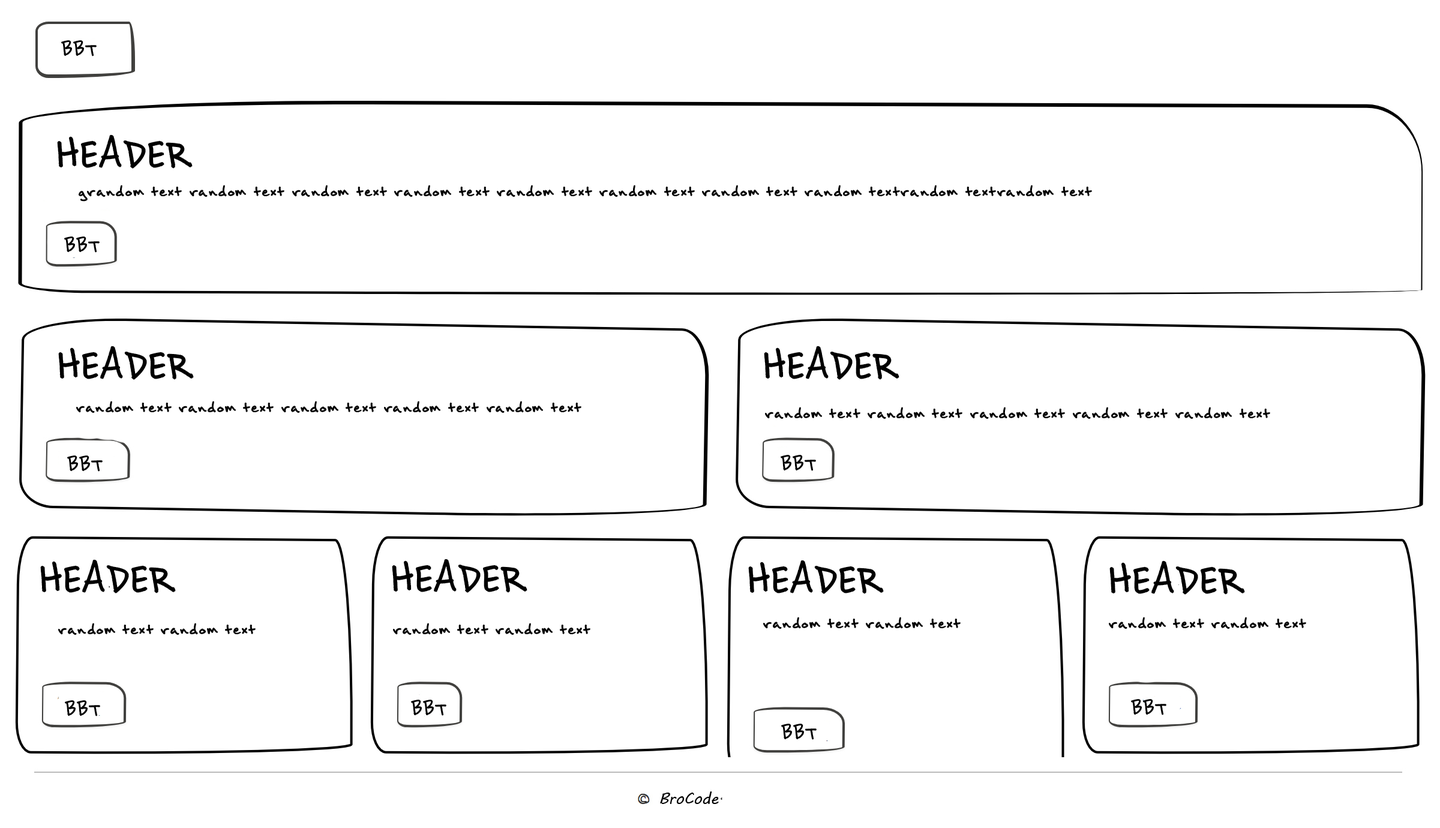
<style>
.page{position:relative;width:1440px;height:828px;background:#ffffff}
.page>*{position:absolute;margin:0}
.t1{font:25.3px "BrownBagLunch";color:#000000}
.t2{font:53.2px "BrownBagLunch";color:#000000}
</style>
<div class="page">
<p class="t1" style="left:61px;top:40px;width:36px;height:16px">BBT</p>
<p class="t2" style="left:57px;top:134px;width:136px;height:35px">HEADER</p>
<p class="t1" style="left:79px;top:185px;width:1013px;height:17px">grandom text random text random text random text random text random text random text random textrandom textrandom text</p>
<p class="t1" style="left:64px;top:236px;width:36px;height:17px">BBT</p>
<p class="t2" style="left:58px;top:346px;width:136px;height:34px">HEADER</p>
<p class="t2" style="left:764px;top:346px;width:135px;height:34px">HEADER</p>
<p class="t1" style="left:76px;top:401px;width:505px;height:12px">random text random text random text random text random text</p>
<p class="t1" style="left:765px;top:407px;width:505px;height:12px">random text random text random text random text random text</p>
<p class="t1" style="left:67px;top:455px;width:36px;height:17px">BBT</p>
<p class="t1" style="left:781px;top:455px;width:35px;height:16px">BBT</p>
<p class="t2" style="left:40px;top:559px;width:136px;height:34px">HEADER</p>
<p class="t2" style="left:392px;top:559px;width:135px;height:34px">HEADER</p>
<p class="t2" style="left:748px;top:560px;width:136px;height:34px">HEADER</p>
<p class="t2" style="left:1109px;top:560px;width:136px;height:35px">HEADER</p>
<p class="t1" style="left:763px;top:617px;width:198px;height:12px">random text random text</p>
<p class="t1" style="left:1109px;top:617px;width:197px;height:12px">random text random text</p>
<p class="t1" style="left:58px;top:623px;width:198px;height:12px">random text random text</p>
<p class="t1" style="left:393px;top:623px;width:197px;height:12px">random text random text</p>
<p class="t1" style="left:65px;top:700px;width:35px;height:16px">BBT</p>
<p class="t1" style="left:411px;top:700px;width:35px;height:16px">BBT</p>
<p class="t1" style="left:1131px;top:699px;width:35px;height:16px">BBT</p>
<p class="t1" style="left:781px;top:724px;width:36px;height:16px">BBT</p>
</div>
